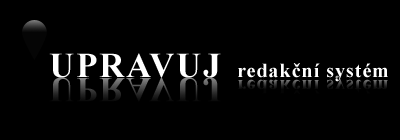
<style>
.page{position:relative;width:400px;height:140px;background:#000000}
.page>*{position:absolute;margin:0}
.t1{font:35px "TimesNewRomanPS-BoldMT";letter-spacing:0.05em;color:#ffffff}
.t2{font:20px "TimesNewRomanPS-BoldMT";letter-spacing:0.05em;color:#ffffff}
.t3{font:35px "TimesNewRomanPS-BoldMT";letter-spacing:0.05em}
</style>
<div class="page">
<p class="t1" style="left:49px;top:53px;width:172px;height:25px">UPRAVUJ</p>
<p class="t2" style="left:238px;top:63px;width:150px;height:19px">redakční systém</p>
<p class="t3" style="left:49px;top:77px;width:172px;height:25px">UPRAVUJ</p>
</div>
